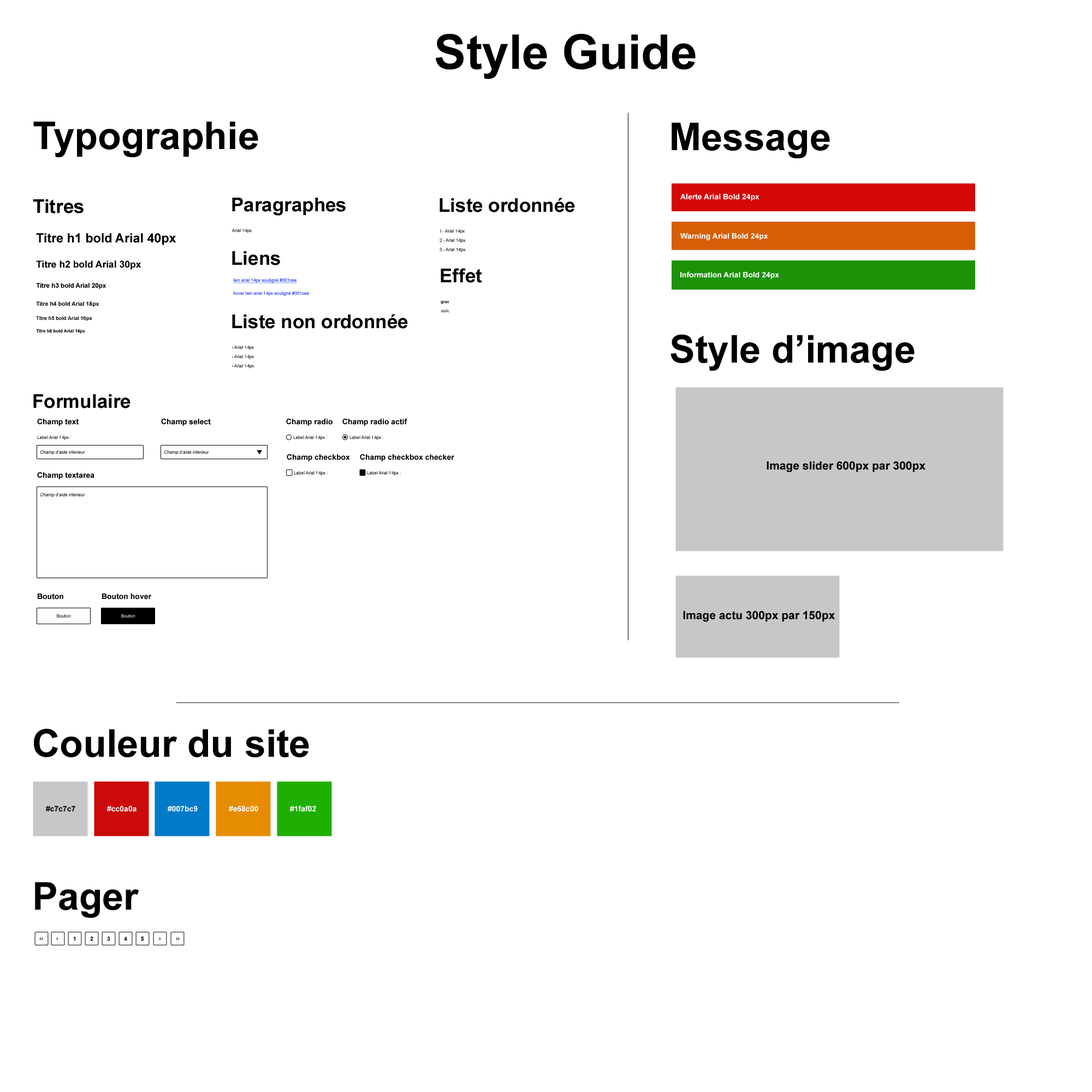
<style>
.page{position:relative;width:1092px;height:1092px;background:#ffffff}
.page>*{position:absolute;margin:0}
.t1{font:81.9px "Arial-BoldMT";color:#000000}
.t2{font:65.5px "Arial-BoldMT";color:#000000}
.t3{font:32.8px "Arial-BoldMT";color:#000000}
.t4{font:13.1px "Arial-BoldMT";color:#ffffff}
.t5{font:21.8px "Arial-BoldMT";color:#000000}
.t6{font:7.6px "ArialMT"}
.t7{font:7.6px "MyriadPro-Regular"}
.t8{font:16.4px "Arial-BoldMT";color:#000000}
.t9{font:7.6px "ArialMT";text-decoration:underline}
.t10{font:10.9px "Arial-BoldMT";color:#000000}
.t11{font:7.6px "ArialMT";color:#001cee}
.t12{font:9.8px "Arial-BoldMT";color:#000000}
.t13{font:7.6px "MyriadPro-Regular";color:#000000;font-style:italic}
.t14{font:7.6px "MyriadPro-Regular";color:#000000;font-weight:bold}
.t15{font:8.7px "Arial-BoldMT";color:#000000}
.t16{font:7.6px "Arial-BoldMT";color:#000000}
.t17{font:13.1px "Arial-BoldMT";color:#000000}
.t18{font:13.1px "Arial-BoldMT";color:#000000;scale:0.76 1}
.t19{font:7.6px "ArialMT";font-style:italic}
.t20{font:19.7px "Arial-BoldMT";color:#000000}
</style>
<div class="page">
<p class="t1" style="left:436px;top:34px;width:260px;height:45px">Style Guide</p>
<p class="t2" style="left:33px;top:121px;width:225px;height:36px">Typographie</p>
<p class="t2" style="left:672px;top:122px;width:158px;height:36px">Message</p>
<p class="t3" style="left:232px;top:198px;width:114px;height:18px">Paragraphes</p>
<p class="t3" style="left:440px;top:198px;width:135px;height:14px">Liste ordonnée</p>
<p class="t4" style="left:680px;top:194px;width:79px;height:7px">Alerte Arial Bold 24px</p>
<p class="t3" style="left:33px;top:199px;width:51px;height:14px">Titres</p>
<p class="t5" style="left:36px;top:233px;width:140px;height:12px">Titre h1 bold Arial 40px</p>
<p class="t6" style="left:232px;top:229px;width:20px;height:4px">Arial 14px</p>
<p class="t6" style="left:440px;top:229px;width:26px;height:23px"><span class="t7">1 - </span>Arial 14px<br>2 - Arial 14px<br>3 - Arial 14px</p>
<p class="t4" style="left:680px;top:233px;width:88px;height:7px">Warning Arial Bold 24px</p>
<p class="t3" style="left:232px;top:251px;width:48px;height:14px">Liens</p>
<p class="t8" style="left:36px;top:260px;width:105px;height:10px">Titre h2 bold Arial 30px</p>
<p class="t3" style="left:441px;top:268px;width:41px;height:15px">Effet</p>
<p class="t9" style="left:233px;top:278px;width:64px;height:5px">lien arial 14px souligné #001cee</p>
<p class="t4" style="left:680px;top:271px;width:99px;height:8px">Information Arial Bold 24px</p>
<p class="t10" style="left:36px;top:283px;width:70px;height:6px">Titre h3 bold Arial 20px</p>
<p class="t11" style="left:233px;top:291px;width:76px;height:5px">hover lien arial 14px souligné #001cee</p>
<p class="t12" style="left:36px;top:301px;width:63px;height:6px">Titre h4 bold Arial 18px</p>
<p class="t13" style="left:441px;top:301px;width:9px;height:11px"><span class="t14">gras<br></span>italic</p>
<p class="t15" style="left:36px;top:316px;width:56px;height:5px">Titre h5 bold Arial 16px</p>
<p class="t3" style="left:232px;top:314px;width:176px;height:15px">Liste non ordonnée</p>
<p class="t16" style="left:36px;top:329px;width:49px;height:5px">Titre h6 bold Arial 14px</p>
<p class="t2" style="left:670px;top:334px;width:245px;height:37px">Style d’image</p>
<p class="t6" style="left:232px;top:346px;width:22px;height:23px"><span class="t7">• </span>Arial 14px<br><span class="t7">• </span>Arial 14px<br><span class="t7">• </span>Arial 14px</p>
<p class="t3" style="left:33px;top:394px;width:97px;height:14px">Formulaire</p>
<p class="t17" style="left:37px;top:418px;width:42px;height:8px">Champ text</p>
<p class="t17" style="left:161px;top:418px;width:50px;height:8px">Champ select</p>
<p class="t17" style="left:286px;top:418px;width:47px;height:8px">Champ radio</p>
<p class="t17" style="left:342px;top:418px;width:65px;height:8px">Champ radio actif</p>
<p class="t6" style="left:37px;top:436px;width:34px;height:4px">Label Arial 14px :</p>
<p class="t6" style="left:293px;top:436px;width:34px;height:4px">Label Arial 14px :</p>
<p class="t6" style="left:349px;top:436px;width:34px;height:4px">Label Arial 14px :</p>
<p class="t18" style="left:257px;top:450px;width:5px;height:4px;rotate:90deg">►</p>
<p class="t19" style="left:40px;top:450px;width:45px;height:5px">Champ d’aide interieur</p>
<p class="t19" style="left:164px;top:450px;width:45px;height:5px">Champ d’aide interieur</p>
<p class="t17" style="left:287px;top:454px;width:63px;height:7px">Champ checkbox</p>
<p class="t17" style="left:360px;top:454px;width:94px;height:7px">Champ checkbox checker</p>
<p class="t20" style="left:767px;top:461px;width:158px;height:11px">Image slider 600px par 300px</p>
<p class="t17" style="left:37px;top:472px;width:57px;height:7px">Champ textarea</p>
<p class="t6" style="left:294px;top:471px;width:34px;height:5px">Label Arial 14px :</p>
<p class="t6" style="left:367px;top:471px;width:34px;height:5px">Label Arial 14px :</p>
<p class="t19" style="left:40px;top:493px;width:45px;height:4px">Champ d’aide interieur</p>
<p class="t17" style="left:38px;top:593px;width:25px;height:7px">Bouton</p>
<p class="t17" style="left:102px;top:593px;width:50px;height:7px">Bouton hover</p>
<p class="t6" style="left:57px;top:614px;width:13px;height:4px">Bouton</p>
<p class="t6" style="left:121px;top:614px;width:14px;height:4px">Bouton</p>
<p class="t20" style="left:683px;top:611px;width:152px;height:11px">Image actu 300px par 150px</p>
<p class="t2" style="left:34px;top:728px;width:275px;height:29px">Couleur du site</p>
<p class="t17" style="left:46px;top:806px;width:29px;height:6px">#c7c7c7</p>
<p class="t4" style="left:107px;top:806px;width:29px;height:6px">#cc0a0a</p>
<p class="t4" style="left:168px;top:806px;width:30px;height:6px">#007bc9</p>
<p class="t4" style="left:229px;top:806px;width:29px;height:6px">#e58c00</p>
<p class="t4" style="left:290px;top:805px;width:26px;height:7px">#1faf02</p>
<p class="t2" style="left:35px;top:882px;width:104px;height:36px">Pager</p>
<p class="t12" style="left:39px;top:937px;width:4px;height:3px">‹‹</p>
<p class="t12" style="left:56px;top:937px;width:2px;height:3px">‹</p>
<p class="t12" style="left:73px;top:936px;width:2px;height:5px">1</p>
<p class="t12" style="left:90px;top:936px;width:3px;height:5px">2</p>
<p class="t12" style="left:107px;top:936px;width:3px;height:5px">3</p>
<p class="t12" style="left:124px;top:936px;width:3px;height:5px">4</p>
<p class="t12" style="left:141px;top:936px;width:3px;height:5px">5</p>
<p class="t12" style="left:159px;top:937px;width:2px;height:3px">›</p>
<p class="t12" style="left:176px;top:937px;width:4px;height:3px">››</p>
</div>
